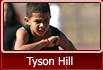
<style>
.page{position:relative;width:103px;height:70px}
.page>*{position:absolute;margin:0}
.t1{font:11px "Tahoma";color:#ffffff}
</style>
<div class="page">
<p class="t1" style="left:26px;top:56px;width:47px;height:12px">Tyson Hill</p>
</div>
